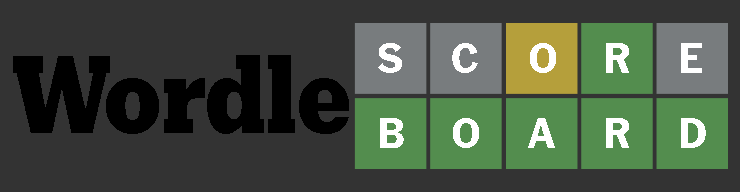
<style>
.page{position:relative;width:740px;height:192px;background:#333333}
.page>*{position:absolute;margin:0}
.t1{font:43px "NYTFranklin-Bold";color:#ffffff}
.t2{font:110.1px "NYTKarnak-Text";color:#000000;scale:0.83 1}
</style>
<div class="page">
<p class="t1" style="left:378px;top:43px;width:24px;height:30px">S</p>
<p class="t1" style="left:452px;top:43px;width:26px;height:30px">C</p>
<p class="t1" style="left:530px;top:43px;width:26px;height:30px">O</p>
<p class="t1" style="left:606px;top:43px;width:23px;height:30px">R</p>
<p class="t1" style="left:681px;top:43px;width:21px;height:30px">E</p>
<p class="t2" style="left:13px;top:55px;width:336px;height:79px">Wordle</p>
<p class="t1" style="left:380px;top:118px;width:24px;height:30px">B</p>
<p class="t1" style="left:453px;top:118px;width:26px;height:30px">O</p>
<p class="t1" style="left:528px;top:118px;width:27px;height:30px">A</p>
<p class="t1" style="left:606px;top:118px;width:23px;height:30px">R</p>
<p class="t1" style="left:681px;top:118px;width:25px;height:30px">D</p>
</div>
